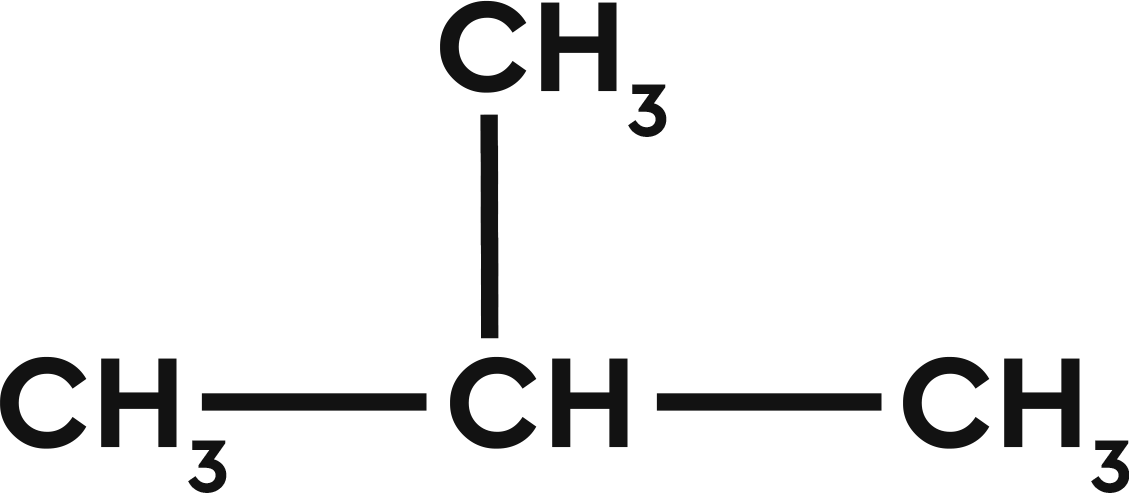
<style>
.page{position:relative;width:1129px;height:493px;background:#ffffff}
.page>*{position:absolute;margin:0}
.t1{font:133.9px "CeraPro-Bold";color:#121212}
.t2{font:153px "CeraPro-Bold";color:#121212}
</style>
<div class="page">
<p class="t1" style="left:440px;top:0px;width:227px;height:137px">CH3</p>
<p class="t2" style="left:480px;top:114px;width:19px;height:225px;rotate:-90deg">-------</p>
<p class="t1" style="left:0px;top:356px;width:227px;height:137px">CH3</p>
<p class="t1" style="left:450px;top:356px;width:178px;height:93px">CH</p>
<p class="t1" style="left:903px;top:356px;width:227px;height:137px">CH3</p>
<p class="t2" style="left:201px;top:393px;width:226px;height:18px">-------</p>
<p class="t2" style="left:656px;top:393px;width:226px;height:18px">-------</p>
</div>
